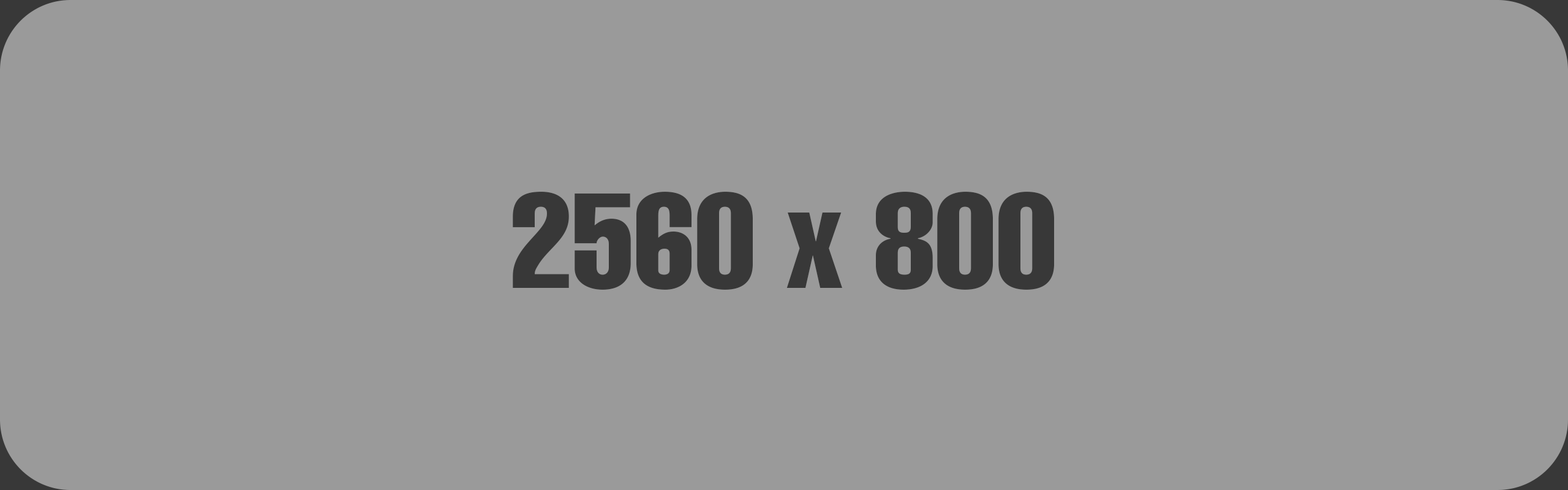
<style>
.page{position:relative;width:1568px;height:490px;background:#9a9a9a}
.page>*{position:absolute;margin:0}
.t1{font:132.1px "Helvetica-Compressed";color:#383838}
</style>
<div class="page">
<p class="t1" style="left:513px;top:192px;width:541px;height:98px">2560 x 800</p>
</div>
